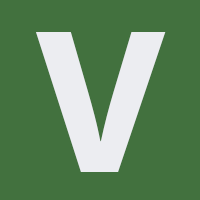
<style>
.page{position:relative;width:200px;height:200px;background:#42713e}
.page>*{position:absolute;margin:0}
.t1{font:208.3px "MyriadPro-Bold";color:#ecedf1}
</style>
<div class="page">
<p class="t1" style="left:36px;top:32px;width:130px;height:140px">V</p>
</div>
